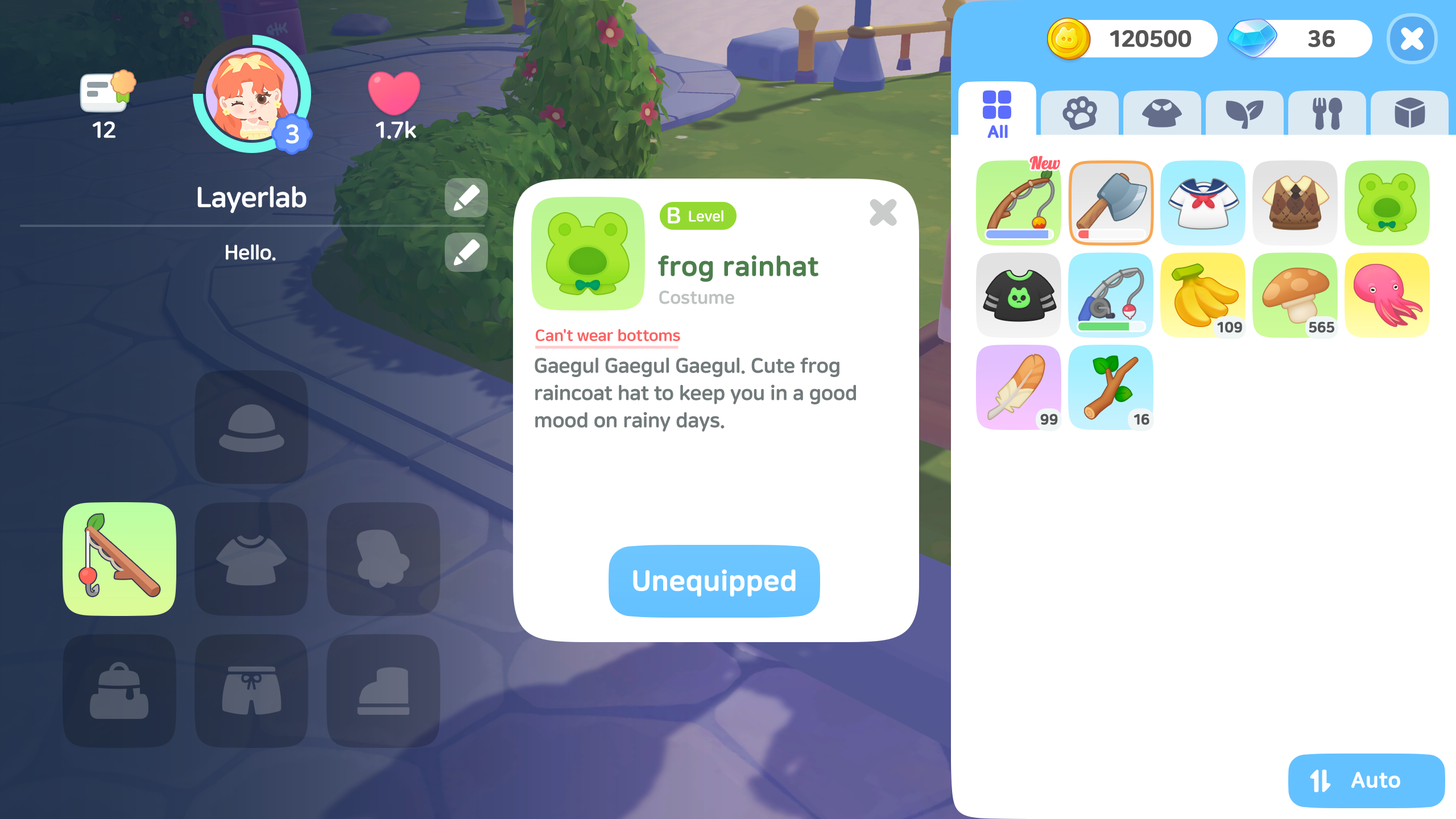
<style>
.page{position:relative;width:1456px;height:819px;background:#ffffff}
.page>*{position:absolute;margin:0}
.t1{font:22.7px "NanumSquareRoundEB";letter-spacing:-0.01em;color:#555555;font-weight:bold}
.t2{font:22.7px "NanumSquareRoundEB";letter-spacing:-0.01em;color:#ffffff}
.t3{font:26.2px "NanumSquareRoundEB";letter-spacing:-0.01em;color:#ffffff}
.t4{font:17.1px "NanumSquareRoundEB";letter-spacing:-0.01em;color:#5c6cfc;font-weight:bold}
.t5{font:17.1px "Lobster1.3";letter-spacing:-0.01em;color:#ff5c68;font-weight:bold}
.t6{font:28.4px "NanumSquareRoundEB";letter-spacing:-0.01em;color:#ffffff}
.t7{font:14.8px "NanumSquareRoundEB";letter-spacing:-0.01em;color:#ffffff}
.t8{font:20.5px "NanumSquareRoundEB";letter-spacing:-0.01em;color:#ffffff}
.t9{font:27.3px "NanumSquareRoundEB";letter-spacing:-0.01em;color:#4c7e4c;font-weight:bold}
.t10{font:18.2px "NanumSquareRoundEB";letter-spacing:-0.01em;color:#bdc2c0}
.t11{font:15.9px "NanumSquareRoundEB";letter-spacing:-0.01em;color:#fb6262}
.t12{font:14.2px "NanumSquareRoundEB";letter-spacing:-0.01em;color:#555555;font-weight:bold}
.t13{font:20.5px/27.3px "NanumSquareRoundEB";letter-spacing:-0.01em;color:#727a7b}
.t14{font:28.4px "NanumSquareRoundEB";letter-spacing:-0.01em;color:#ffffff;font-weight:bold}
.t15{font:21.6px "NanumSquareRoundEB";letter-spacing:-0.01em;color:#ffffff;font-weight:bold}
</style>
<div class="page">
<p class="t1" style="left:1110px;top:30px;width:82px;height:17px">120500</p>
<p class="t1" style="left:1308px;top:30px;width:27px;height:17px">36</p>
<p class="t2" style="left:93px;top:121px;width:22px;height:17px">12</p>
<p class="t3" style="left:286px;top:124px;width:13px;height:20px">3</p>
<p class="t2" style="left:376px;top:121px;width:40px;height:18px">1.7k</p>
<p class="t4" style="left:987px;top:125px;width:21px;height:13px">All</p>
<p class="t5" style="left:1029px;top:156px;width:31px;height:13px">New</p>
<p class="t6" style="left:197px;top:186px;width:110px;height:27px">Layerlab</p>
<p class="t2" style="left:668px;top:207px;width:12px;height:17px">B</p>
<p class="t7" style="left:689px;top:210px;width:34px;height:12px">Level</p>
<p class="t8" style="left:226px;top:244px;width:50px;height:17px">Hello.</p>
<p class="t9" style="left:658px;top:255px;width:160px;height:27px">frog rainhat</p>
<p class="t10" style="left:659px;top:291px;width:75px;height:13px">Costume</p>
<p class="t11" style="left:536px;top:329px;width:144px;height:12px">Can't wear bottoms</p>
<p class="t12" style="left:1217px;top:321px;width:25px;height:12px">109</p>
<p class="t12" style="left:1309px;top:321px;width:25px;height:12px">565</p>
<p class="t13" style="left:535px;top:357px;width:321px;height:75px">Gaegul Gaegul Gaegul. Cute frog <br>raincoat hat to keep you in a good <br>mood on rainy days.</p>
<p class="t12" style="left:1040px;top:413px;width:18px;height:12px">99</p>
<p class="t12" style="left:1134px;top:413px;width:15px;height:12px">16</p>
<p class="t14" style="left:633px;top:569px;width:163px;height:28px">Unequipped</p>
<p class="t15" style="left:1351px;top:772px;width:49px;height:16px">Auto</p>
</div>
